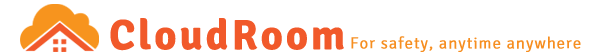
<style>
.page{position:relative;width:600px;height:52px;background:#ffffff}
.page>*{position:absolute;margin:0}
.t1{font:42px "Signika-Bold";letter-spacing:0.05em;color:#f1592a;font-weight:bold}
.t2{font:16px "Signika-Light";letter-spacing:0.05em;color:#f68e20;font-weight:bold}
</style>
<div class="page">
<p class="t1" style="left:110px;top:18px;width:234px;height:33px">CloudRoom</p>
<p class="t2" style="left:351px;top:36px;width:230px;height:16px">For safety, anytime anywhere</p>
</div>
